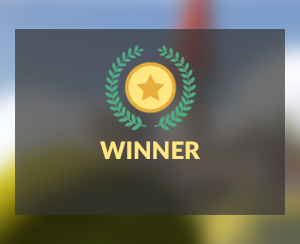
<style>
.page{position:relative;width:300px;height:244px}
.page>*{position:absolute;margin:0}
.t1{font:24px "Lato-Black";color:#ffe681}
</style>
<div class="page">
<p class="t1" style="left:100px;top:141px;width:100px;height:18px">WINNER</p>
</div>
